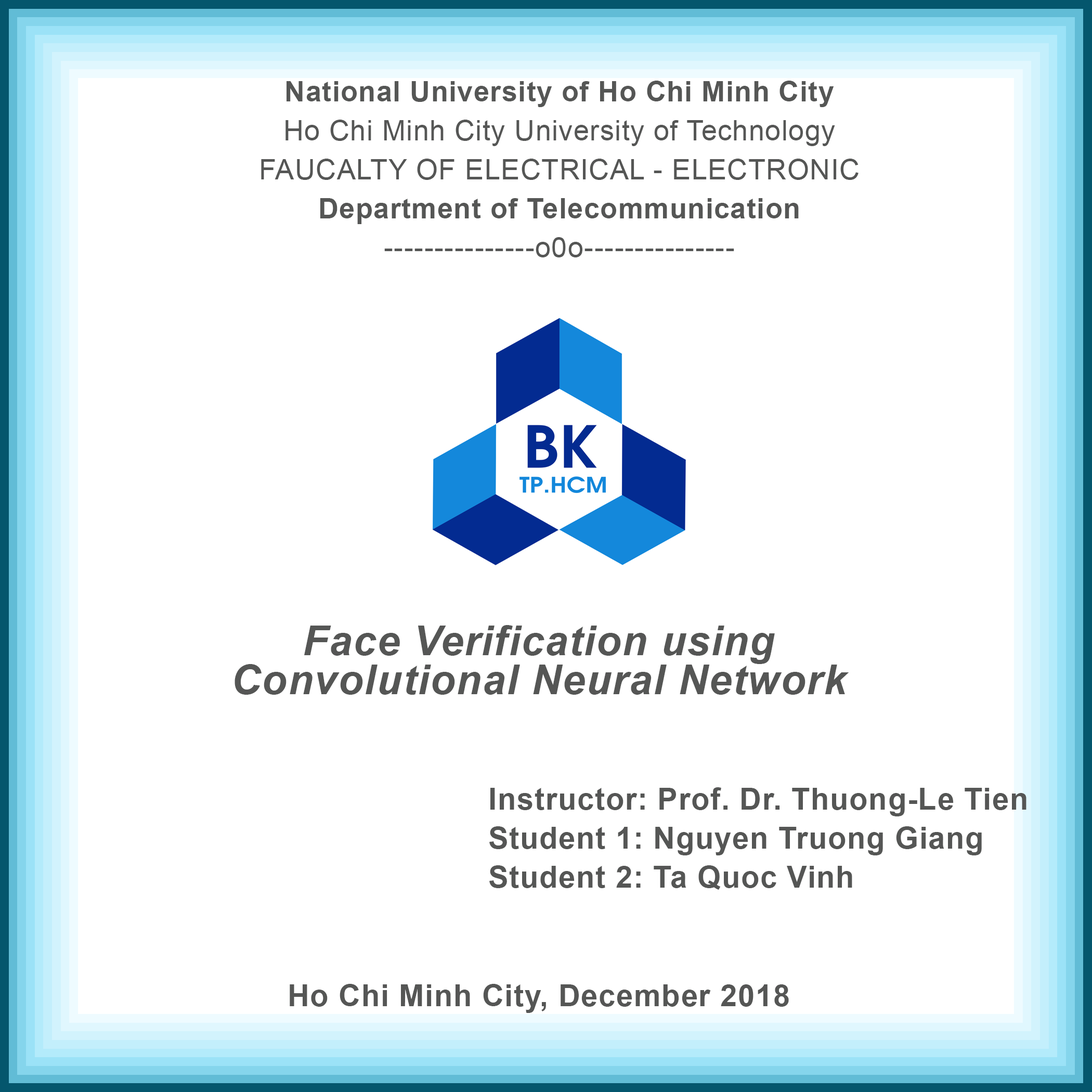
<style>
.page{position:relative;width:1092px;height:1092px;background:#ffffff}
.page>*{position:absolute;margin:0}
.t1{font:28.2px/39px "ArialMT";letter-spacing:0.025em;color:#555655}
.t2{font:28.2px/39px "Arial-BoldMT";letter-spacing:0.025em;color:#555655}
.t3{font:41.2px/39px "Arial-BoldItalicMT";letter-spacing:0.025em;color:#555655}
.t4{font:30.3px/39px "Arial-BoldMT";letter-spacing:0.025em;color:#555655}
.t5{font:30.3px/39px "ArialMT";letter-spacing:0.025em;color:#555655}
</style>
<div class="page">
<p class="t1" style="left:261px;top:81px;width:598px;height:176px;text-align:center"><span class="t2">National University of Ho Chi Minh City<br></span>Ho Chi Minh City University of Technology<br>FAUCALTY OF ELECTRICAL - ELECTRONIC <br><span class="t2">Department of Telecommunication<br></span>---------------o0o---------------</p>
<p class="t3" style="left:235px;top:625px;width:614px;height:388px;text-align:center">Face Verification using <br>Convolutional Neural Network<br><br><br><br><br><br><br><br><span class="t4">Ho Chi Minh City, December 2018</span></p>
<p class="t4" style="left:489px;top:787px;width:537px;height:103px;text-align:right"><span class="t5"><br></span>Instructor: Prof. Dr. Thuong-Le Tien<br>Student 1: Nguyen Truong Giang<br>Student 2: Ta Quoc Vinh</p>
</div>
